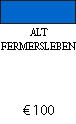
<style>
.page{position:relative;width:76px;height:124px;background:#ffffff}
.page>*{position:absolute;margin:0}
.t1{font:12px "AdobeDevanagari-Regular";color:#000000;scale:0.9 1}
.t2{font:14px "MyriadPro-Regular";color:#000000}
</style>
<div class="page">
<p class="t1" style="left:1px;top:28px;width:75px;height:22px;text-align:center">ALT<br>FERMERSLEBEN</p>
<p class="t2" style="left:23px;top:105px;width:31px;height:10px">€ 100</p>
</div>
